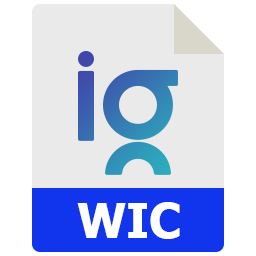
<style>
.page{position:relative;width:256px;height:256px;background:#eaeaea}
.page>*{position:absolute;margin:0}
.t1{font:48px "Tahoma-Bold";color:#ffffff}
</style>
<div class="page">
<p class="t1" style="left:77px;top:202px;width:103px;height:37px">WIC</p>
</div>
